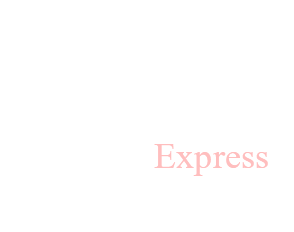
<style>
.page{position:relative;width:294px;height:232px;background:#ffffff}
.page>*{position:absolute;margin:0}
.t1{font:36px "TimesNewRomanPSMT";letter-spacing:0.005em;color:#ffbebe}
</style>
<div class="page">
<p class="t1" style="left:154px;top:144px;width:114px;height:32px">Express</p>
</div>
